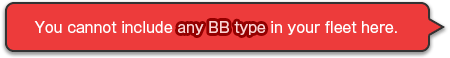
<style>
.page{position:relative;width:450px;height:58px;background:#ed3b3b}
.page>*{position:absolute;margin:0}
.t1{font:14px "GothicMB101Pro-Regular";color:#ffffff}
.t2{font:14px "GothicMB101Pro-Regular";color:#ffd3d3}
</style>
<div class="page">
<p class="t1" style="left:34px;top:21px;width:363px;height:14px">You cannot include <span class="t2">any BB type</span> in your fleet here.</p>
<p class="t1" style="left:34px;top:21px;width:363px;height:14px">You cannot include <span class="t2">any BB type</span> in your fleet here.</p>
</div>
